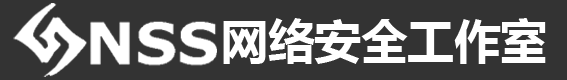
<style>
.page{position:relative;width:567px;height:80px;background:#333333}
.page>*{position:absolute;margin:0}
.t1{font:46.5px "MicrosoftYaHei-Bold";color:#ffffff}
</style>
<div class="page">
<p class="t1" style="left:223px;top:18px;width:323px;height:46px">网络安全工作室</p>
</div>
